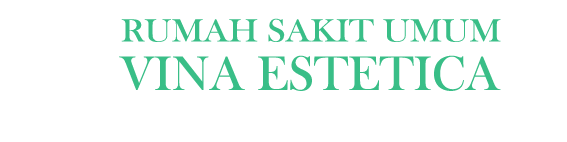
<style>
.page{position:relative;width:567px;height:142px;background:#ffffff}
.page>*{position:absolute;margin:0}
.t1{font:32.9px "BaskOldFace";color:#39be87;scale:1.1 1}
.t2{font:50px "BaskOldFace";color:#39be87}
</style>
<div class="page">
<p class="t1" style="left:121px;top:18px;width:380px;height:24px">RUMAH SAKIT UMUM</p>
<p class="t2" style="left:119px;top:55px;width:382px;height:36px">VINA ESTETICA</p>
</div>
